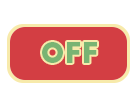
<style>
.page{position:relative;width:140px;height:107px;background:#ffffff}
.page>*{position:absolute;margin:0}
.t1{font:28px "BigJohn";color:#79b473}
</style>
<div class="page">
<p class="t1" style="left:42px;top:42px;width:55px;height:21px">off</p>
</div>
